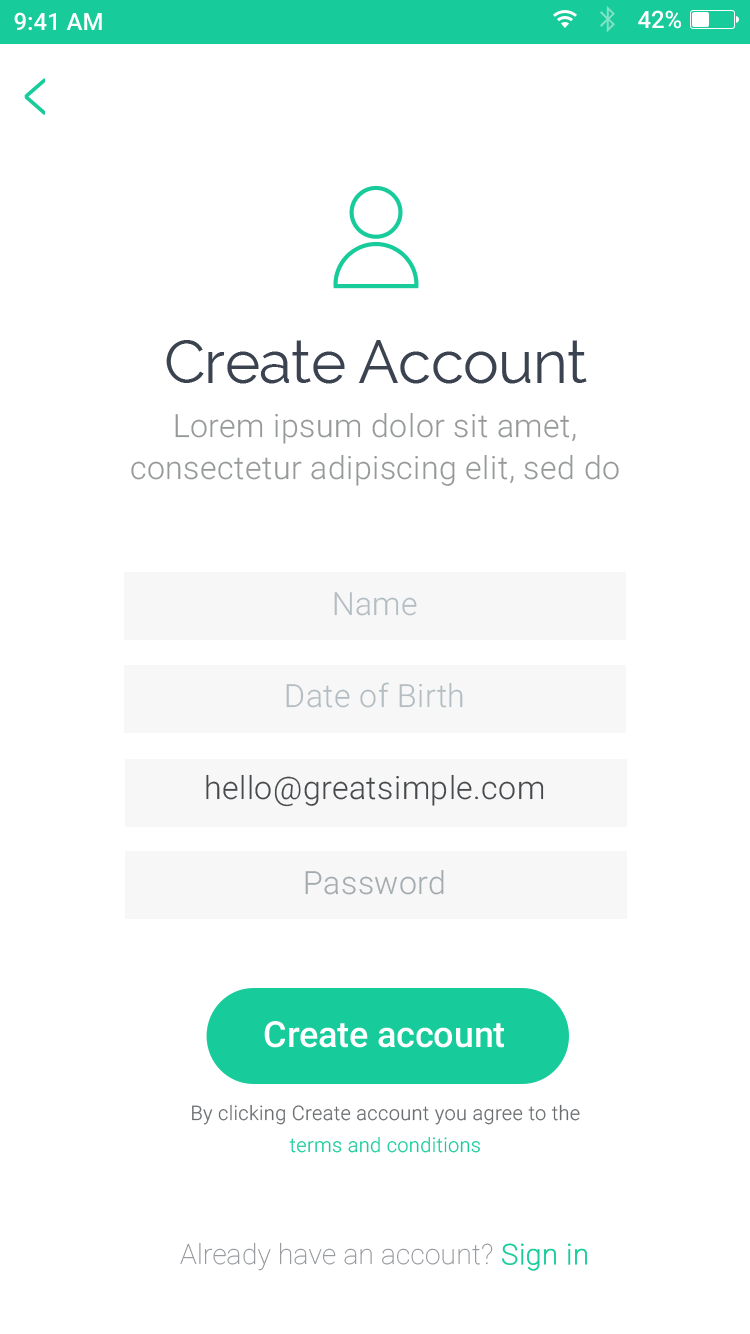
<style>
.page{position:relative;width:750px;height:1334px;background:#ffffff}
.page>*{position:absolute;margin:0}
.t1{font:24px "Roboto-Medium";color:#ffffff}
.t2{font:89.3px "Roboto-Thin";letter-spacing:0.01em;color:#18cb9b;font-weight:bold;scale:0.52 1}
.t3{font:60px "Raleway";letter-spacing:-0.01em;color:#3c4350}
.t4{font:32px/42px "Roboto-Light";letter-spacing:0.015em;color:#96999a}
.t5{font:32px "Roboto-Light";letter-spacing:0.015em;color:#b3bdc2}
.t6{font:32px "Roboto-Light";letter-spacing:0.015em;color:#474a4c}
.t7{font:32px "Roboto-Light";letter-spacing:0.015em;color:#a4abae}
.t8{font:36px "Roboto-Medium";letter-spacing:-0.005em;color:#ffffff}
.t9{font:20.1px/31.2px "Roboto-Light";letter-spacing:0.015em;color:#696d6f}
.t10{font:20.1px/31.2px "Roboto-Light";letter-spacing:0.015em;color:#18cb9b}
.t11{font:28px "Roboto-Thin";letter-spacing:0.01em;color:#919499}
.t12{font:28px "Roboto-Thin";letter-spacing:0.01em;color:#18cb9b;font-weight:bold}
</style>
<div class="page">
<p class="t1" style="left:14px;top:12px;width:88px;height:19px">9:41 AM</p>
<p class="t1" style="left:638px;top:10px;width:43px;height:19px">42%</p>
<p class="t2" style="left:24px;top:78px;width:21px;height:37px">&lt;</p>
<p class="t3" style="left:166px;top:340px;width:421px;height:44px">Create Account</p>
<p class="t4" style="left:131px;top:412px;width:488px;height:74px;text-align:center">Lorem ipsum dolor sit amet, consectetur adipiscing elit, sed do</p>
<p class="t5" style="left:334px;top:592px;width:83px;height:24px">Name</p>
<p class="t5" style="left:286px;top:682px;width:177px;height:26px">Date of Birth</p>
<p class="t6" style="left:206px;top:774px;width:338px;height:33px">hello@greatsimple.com</p>
<p class="t7" style="left:305px;top:869px;width:139px;height:26px">Password</p>
<p class="t8" style="left:264px;top:1021px;width:240px;height:27px">Create account</p>
<p class="t9" style="left:192px;top:1104px;width:388px;height:49px;text-align:center">By clicking Create account you agree to the<br><span class="t10">terms and conditions</span></p>
<p class="t11" style="left:180px;top:1242px;width:407px;height:29px">Already have an account? <span class="t12">Sign in</span></p>
</div>
